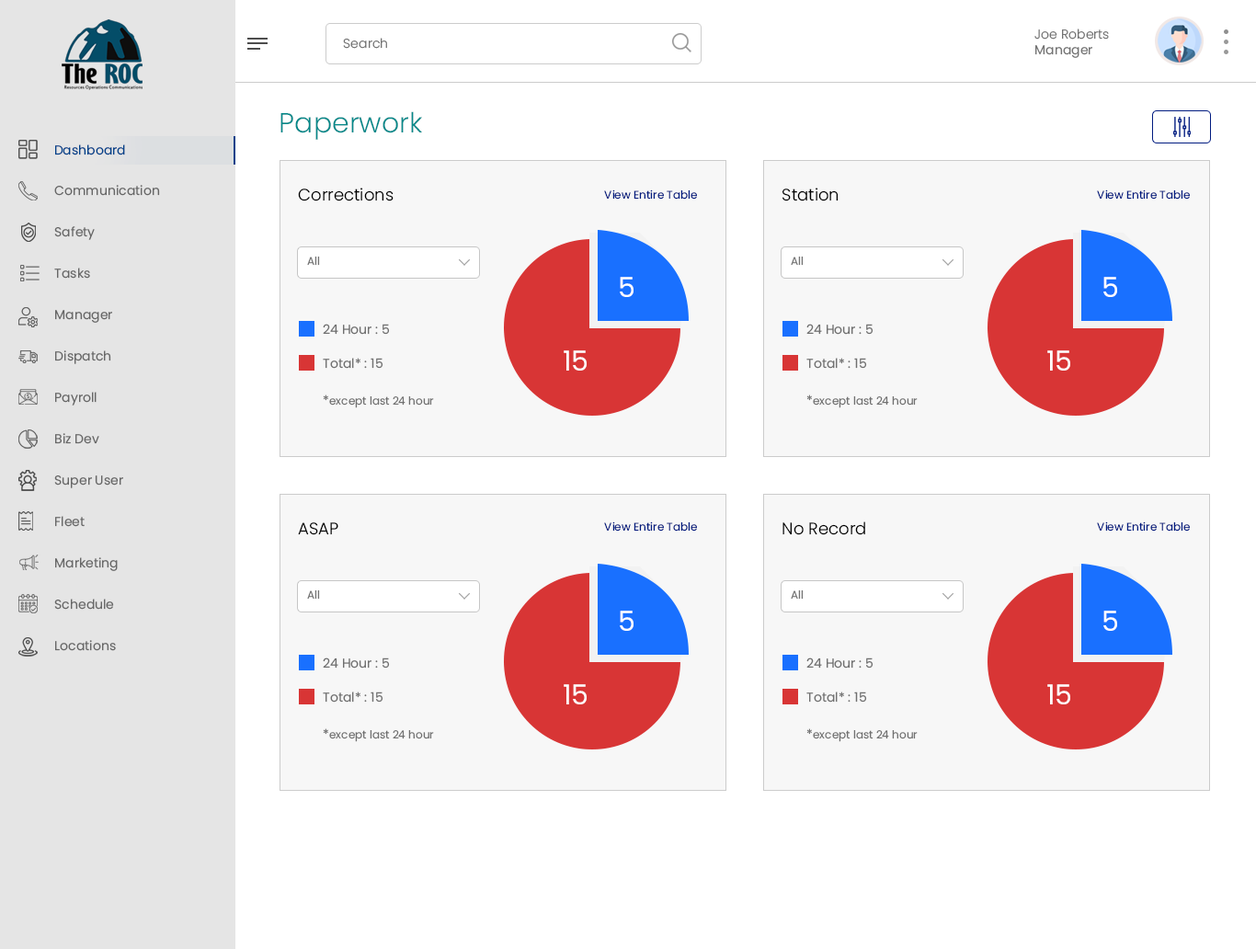
<style>
.page{position:relative;width:1256px;height:949px;background:#ffffff}
.page>*{position:absolute;margin:0}
.t1{font:12.9px "Poppins-Light";color:#737373}
.t2{font:12.9px "Poppins-Regular";color:#737373}
.t3{font:27.6px "Poppins-Light";color:#03898a}
.t4{font:12.9px "Poppins-Regular";color:#01418a}
.t5{font:12.9px/41.4px "Poppins-Regular";color:#676767}
.t6{font:16.6px "Poppins-Light";color:#000000}
.t7{font:11px "Poppins-Regular";color:#011b80}
.t8{font:11px "Poppins-Regular";color:#737373}
.t9{font:27.6px "Poppins-Regular";color:#ffffff}
.t10{font:12.9px "Poppins-Regular";color:#707070}
.t11{font:11px "Poppins-Regular";color:#707070}
</style>
<div class="page">
<p class="t1" style="left:1035px;top:29px;width:74px;height:29px">Joe Roberts<br><span class="t2">Manager</span></p>
<p class="t1" style="left:343px;top:38px;width:44px;height:11px">Search</p>
<p class="t3" style="left:281px;top:111px;width:141px;height:29px">Paperwork</p>
<p class="t4" style="left:55px;top:144px;width:70px;height:11px">Dashboard</p>
<p class="t5" style="left:54px;top:185px;width:106px;height:466px">Communication<br>Safety<br>Tasks<br>Manager<br>Dispatch<br>Payroll<br>Biz Dev<br>Super User<br>Fleet<br>Marketing<br>Schedule<br>Locations</p>
<p class="t6" style="left:298px;top:188px;width:96px;height:13px">Corrections</p>
<p class="t7" style="left:604px;top:189px;width:93px;height:11px">View Entire Table</p>
<p class="t6" style="left:783px;top:188px;width:56px;height:13px">Station</p>
<p class="t7" style="left:1097px;top:189px;width:93px;height:11px">View Entire Table</p>
<p class="t8" style="left:307px;top:257px;width:13px;height:9px">All</p>
<p class="t8" style="left:791px;top:257px;width:13px;height:9px">All</p>
<p class="t9" style="left:620px;top:277px;width:14px;height:20px">5</p>
<p class="t9" style="left:1104px;top:277px;width:13px;height:20px">5</p>
<p class="t10" style="left:323px;top:324px;width:67px;height:11px">24 Hour : 5</p>
<p class="t10" style="left:807px;top:324px;width:67px;height:11px">24 Hour : 5</p>
<p class="t9" style="left:564px;top:350px;width:23px;height:21px">15</p>
<p class="t9" style="left:1048px;top:350px;width:23px;height:21px">15</p>
<p class="t10" style="left:323px;top:358px;width:61px;height:11px">Total* : 15</p>
<p class="t10" style="left:807px;top:358px;width:60px;height:11px">Total* : 15</p>
<p class="t11" style="left:323px;top:395px;width:111px;height:13px"><span class="t10">*</span>except last 24 hour</p>
<p class="t11" style="left:807px;top:395px;width:111px;height:13px"><span class="t10">*</span>except last 24 hour</p>
<p class="t7" style="left:604px;top:521px;width:93px;height:11px">View Entire Table</p>
<p class="t6" style="left:783px;top:521px;width:82px;height:14px">No Record</p>
<p class="t7" style="left:1097px;top:521px;width:93px;height:11px">View Entire Table</p>
<p class="t6" style="left:298px;top:522px;width:40px;height:13px">ASAP</p>
<p class="t8" style="left:307px;top:590px;width:13px;height:10px">All</p>
<p class="t8" style="left:791px;top:590px;width:13px;height:10px">All</p>
<p class="t9" style="left:620px;top:611px;width:14px;height:20px">5</p>
<p class="t9" style="left:1104px;top:611px;width:13px;height:20px">5</p>
<p class="t10" style="left:323px;top:658px;width:67px;height:11px">24 Hour : 5</p>
<p class="t10" style="left:807px;top:658px;width:67px;height:11px">24 Hour : 5</p>
<p class="t9" style="left:564px;top:684px;width:23px;height:20px">15</p>
<p class="t9" style="left:1048px;top:684px;width:23px;height:20px">15</p>
<p class="t10" style="left:323px;top:692px;width:61px;height:11px">Total* : 15</p>
<p class="t10" style="left:807px;top:692px;width:60px;height:11px">Total* : 15</p>
<p class="t11" style="left:323px;top:728px;width:111px;height:14px"><span class="t10">*</span>except last 24 hour</p>
<p class="t11" style="left:807px;top:728px;width:111px;height:14px"><span class="t10">*</span>except last 24 hour</p>
</div>
